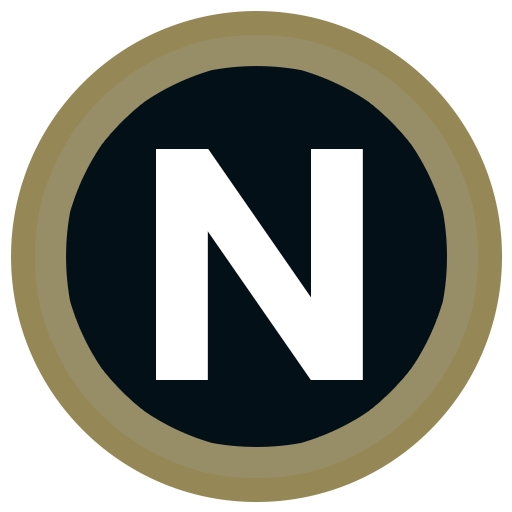
<style>
.page{position:relative;width:512px;height:512px;background:#ffffff}
.page>*{position:absolute;margin:0}
.t1{font:331.5px "NetflixSans-Bold";color:#ffffff}
</style>
<div class="page">
<p class="t1" style="left:156px;top:149px;width:207px;height:231px">N</p>
</div>
